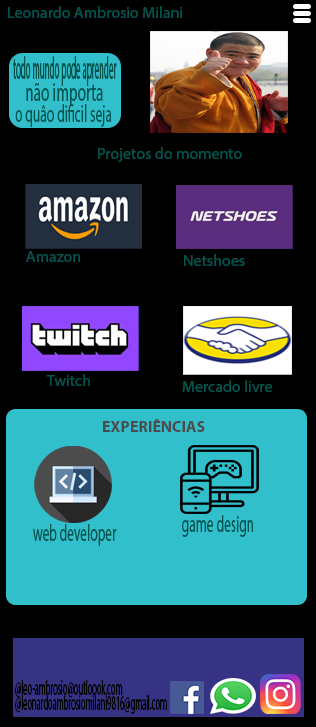
<style>
.page{position:relative;width:316px;height:727px;background:#000000}
.page>*{position:absolute;margin:0}
.t1{font:16px "MyriadPro-Regular";color:#03544d}
.t2{font:31.7px "MyriadPro-Regular";color:#03544d;scale:0.28 1}
.t3{font:26.7px "MyriadPro-Regular";color:#03544d;scale:0.57 1}
.t4{font:24.5px "MyriadPro-Regular";color:#03544d;scale:0.55 1}
.t5{font:16px "MyriadPro-Bold";color:#4c4c4c}
.t6{font:23.5px "MyriadPro-Regular";color:#03544d;scale:0.57 1}
.t7{font:21.1px "MyriadPro-Regular";color:#020202;scale:0.4 1}
</style>
<div class="page">
<p class="t1" style="left:8px;top:6px;width:174px;height:12px">Leonardo Ambrosio Milani</p>
<p class="t2" style="left:13px;top:56px;width:104px;height:30px">todo mundo pode aprender</p>
<p class="t3" style="left:26px;top:82px;width:77px;height:24px">não importa</p>
<p class="t4" style="left:15px;top:104px;width:97px;height:23px">o quâo dificil seja</p>
<p class="t1" style="left:98px;top:147px;width:144px;height:15px">Projetos do momento</p>
<p class="t1" style="left:26px;top:251px;width:54px;height:11px">Amazon</p>
<p class="t1" style="left:184px;top:254px;width:61px;height:12px">Netshoes</p>
<p class="t1" style="left:46px;top:374px;width:44px;height:12px">Twitch</p>
<p class="t1" style="left:182px;top:380px;width:90px;height:12px">Mercado livre</p>
<p class="t5" style="left:103px;top:419px;width:102px;height:13px">EXPERIÊNCIAS</p>
<p class="t6" style="left:182px;top:515px;width:71px;height:22px">game design</p>
<p class="t6" style="left:33px;top:524px;width:84px;height:22px">web developer</p>
<p class="t7" style="left:15px;top:680px;width:108px;height:18px">@leo-ambrosio@outloook.com</p>
<p class="t7" style="left:15px;top:695px;width:152px;height:19px">@leonardoambrosiomilani9816@gmail.com</p>
</div>
